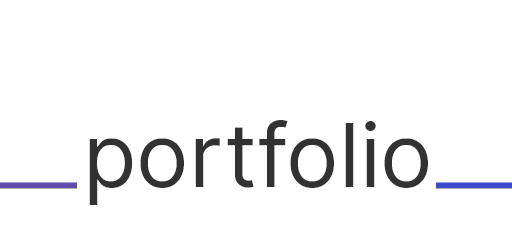
<style>
.page{position:relative;width:512px;height:234px;background:#ffffff}
.page>*{position:absolute;margin:0}
.t1{font:88px "Inter-Regular";color:#323232}
</style>
<div class="page">
<p class="t1" style="left:89px;top:120px;width:339px;height:85px">portfolio</p>
</div>
